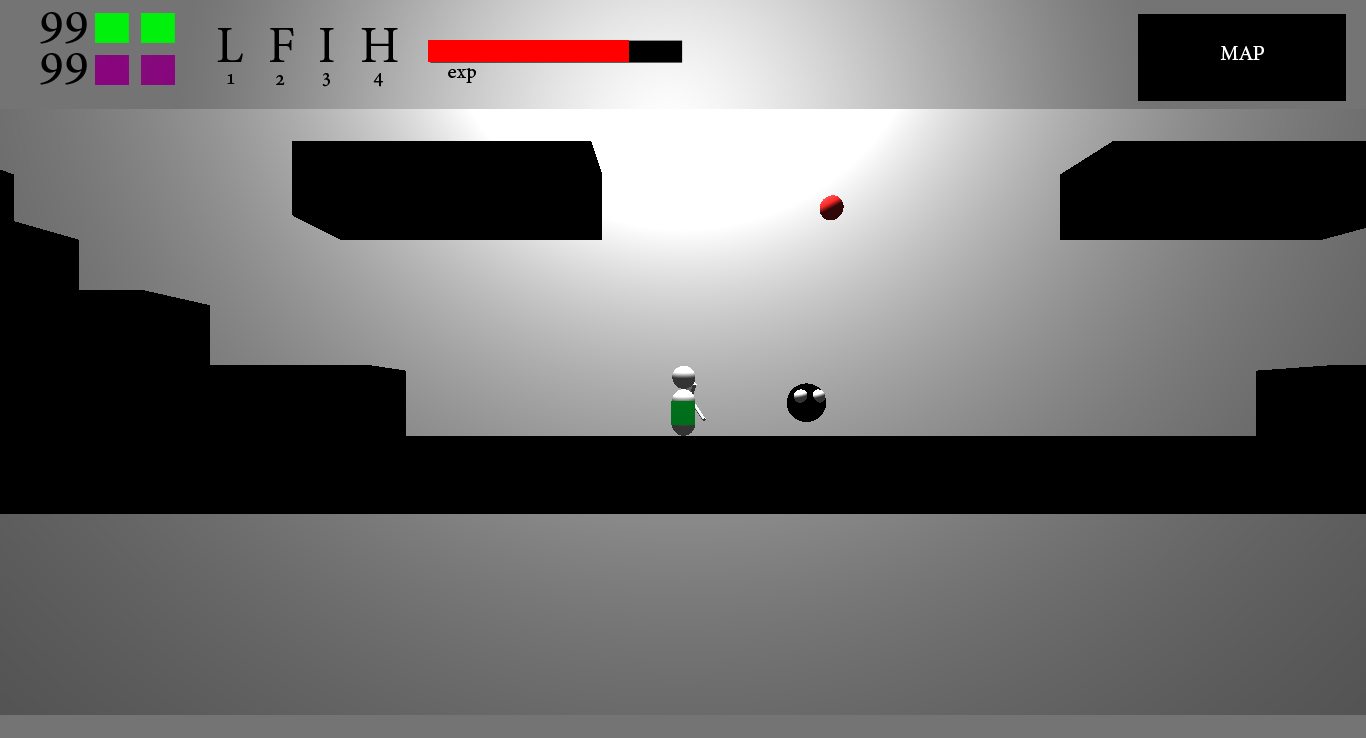
<style>
.page{position:relative;width:1366px;height:738px;background:#000000}
.page>*{position:absolute;margin:0}
.t1{font:50px "AdobeHebrew-Regular";color:#000000}
.t2{font:20px "AdobeHebrew-Regular";color:#ffffff}
.t3{font:20px "AdobeHebrew-Regular";color:#000000}
</style>
<div class="page">
<p class="t1" style="left:40px;top:12px;width:47px;height:32px">99</p>
<p class="t1" style="left:217px;top:28px;width:181px;height:34px">L  F  I  H</p>
<p class="t1" style="left:40px;top:53px;width:47px;height:32px">99</p>
<p class="t2" style="left:1220px;top:46px;width:44px;height:14px">MAP</p>
<p class="t3" style="left:227px;top:74px;width:8px;height:10px">1</p>
<p class="t3" style="left:276px;top:75px;width:9px;height:10px">2</p>
<p class="t3" style="left:322px;top:73px;width:8px;height:14px">3</p>
<p class="t3" style="left:373px;top:73px;width:10px;height:14px">4</p>
<p class="t3" style="left:448px;top:68px;width:28px;height:15px">exp</p>
</div>
